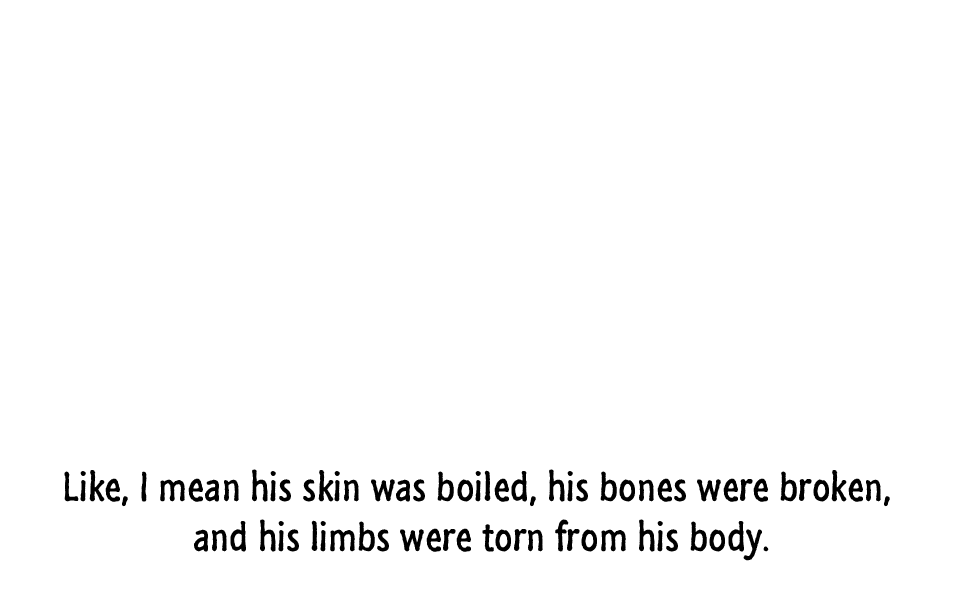
<style>
.page{position:relative;width:960px;height:600px;background:#ffffff}
.page>*{position:absolute;margin:0}
.t1{font:42px "SegoeMarker";color:#000000}
</style>
<div class="page">
<p class="t1" style="left:64px;top:469px;width:826px;height:92px;text-align:center">Like, I mean his skin was boiled, his bones were broken, <br>and his limbs were torn from his body.</p>
</div>
